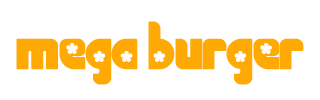
<style>
.page{position:relative;width:320px;height:100px;background:#ffffff}
.page>*{position:absolute;margin:0}
.t1{font:60px "Chick";color:#ffa904}
</style>
<div class="page">
<p class="t1" style="left:16px;top:21px;width:288px;height:64px">mega burger</p>
</div>
